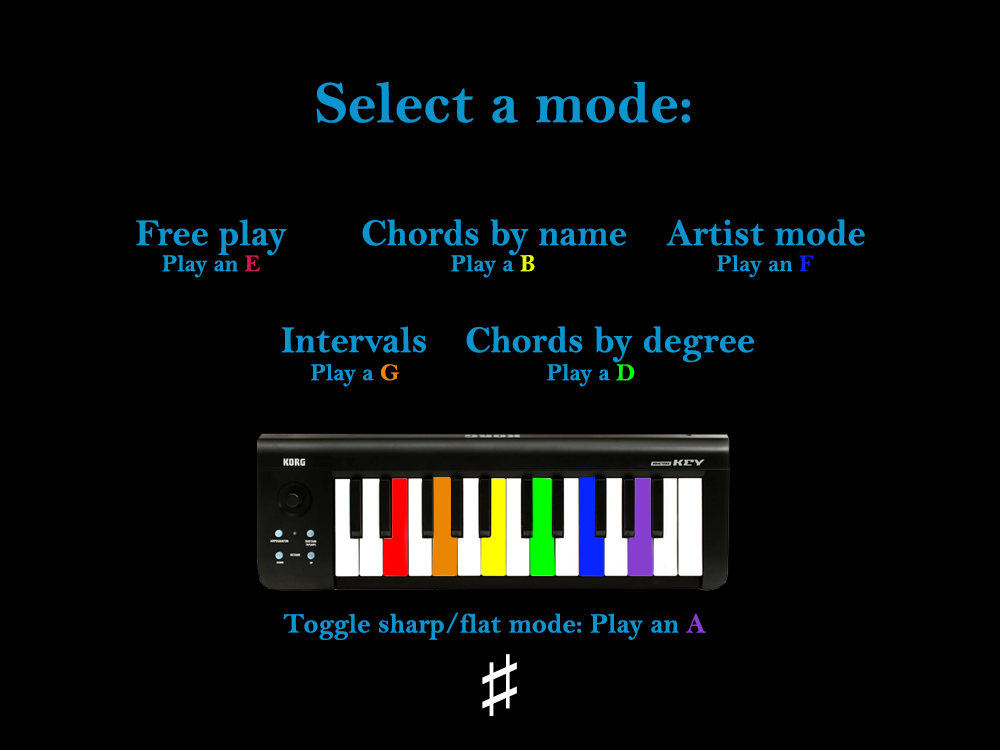
<style>
.page{position:relative;width:1000px;height:750px;background:#000000}
.page>*{position:absolute;margin:0}
.t1{font:60px "BellMTBold";color:#0c94cd}
.t2{font:38px "BellMTBold";color:#0c94cd}
.t3{font:24px "BellMTBold";color:#0c94cd}
.t4{font:24px "BellMTBold";color:#cf1a4d}
.t5{font:24px "BellMTBold";color:#e3fe00}
.t6{font:24px "BellMTBold";color:#ea8604}
.t7{font:24px "BellMTBold";color:#00ff00}
.t8{font:28px "BellMTBold";color:#0c94cd}
.t9{font:28px "BellMTBold";color:#853ecd}
.t10{font:75px "ArialMT";color:#ffffff}
</style>
<div class="page">
<p class="t1" style="left:316px;top:81px;width:374px;height:42px">Select a mode:</p>
<p class="t2" style="left:135px;top:219px;width:152px;height:37px">Free play</p>
<p class="t2" style="left:362px;top:219px;width:264px;height:37px">Chords by name</p>
<p class="t2" style="left:666px;top:219px;width:199px;height:27px">Artist mode</p>
<p class="t3" style="left:162px;top:254px;width:98px;height:24px">Play an <span class="t4">E</span></p>
<p class="t3" style="left:451px;top:254px;width:84px;height:24px">Play a <span class="t5">B</span></p>
<p class="t2" style="left:281px;top:326px;width:145px;height:27px">Intervals</p>
<p class="t2" style="left:466px;top:326px;width:288px;height:37px">Chords by degree</p>
<p class="t3" style="left:311px;top:363px;width:88px;height:24px">Play a <span class="t6">G</span></p>
<p class="t3" style="left:547px;top:363px;width:88px;height:24px">Play a <span class="t7">D</span></p>
<p class="t8" style="left:283px;top:612px;width:423px;height:28px">Toggle sharp/flat mode: Play an <span class="t9">A</span></p>
<p class="t10" style="left:482px;top:654px;width:35px;height:62px">♯</p>
</div>
